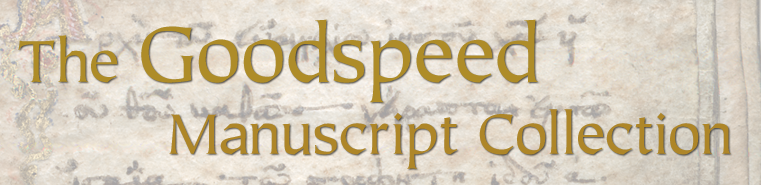
<style>
.page{position:relative;width:761px;height:185px}
.page>*{position:absolute;margin:0}
.t1{font:75px "DYLAN";letter-spacing:0.01em;color:#ae8c28}
.t2{font:56.2px "DYLAN";letter-spacing:0.01em;color:#ae8c28}
.t3{font:54.2px "DYLAN";letter-spacing:0.01em;color:#ae8628}
</style>
<div class="page">
<p class="t1" style="left:18px;top:19px;width:520px;height:84px"><span class="t2">The </span>Goodspeed</p>
<p class="t3" style="left:169px;top:109px;width:562px;height:60px">Manuscript Collection</p>
</div>
